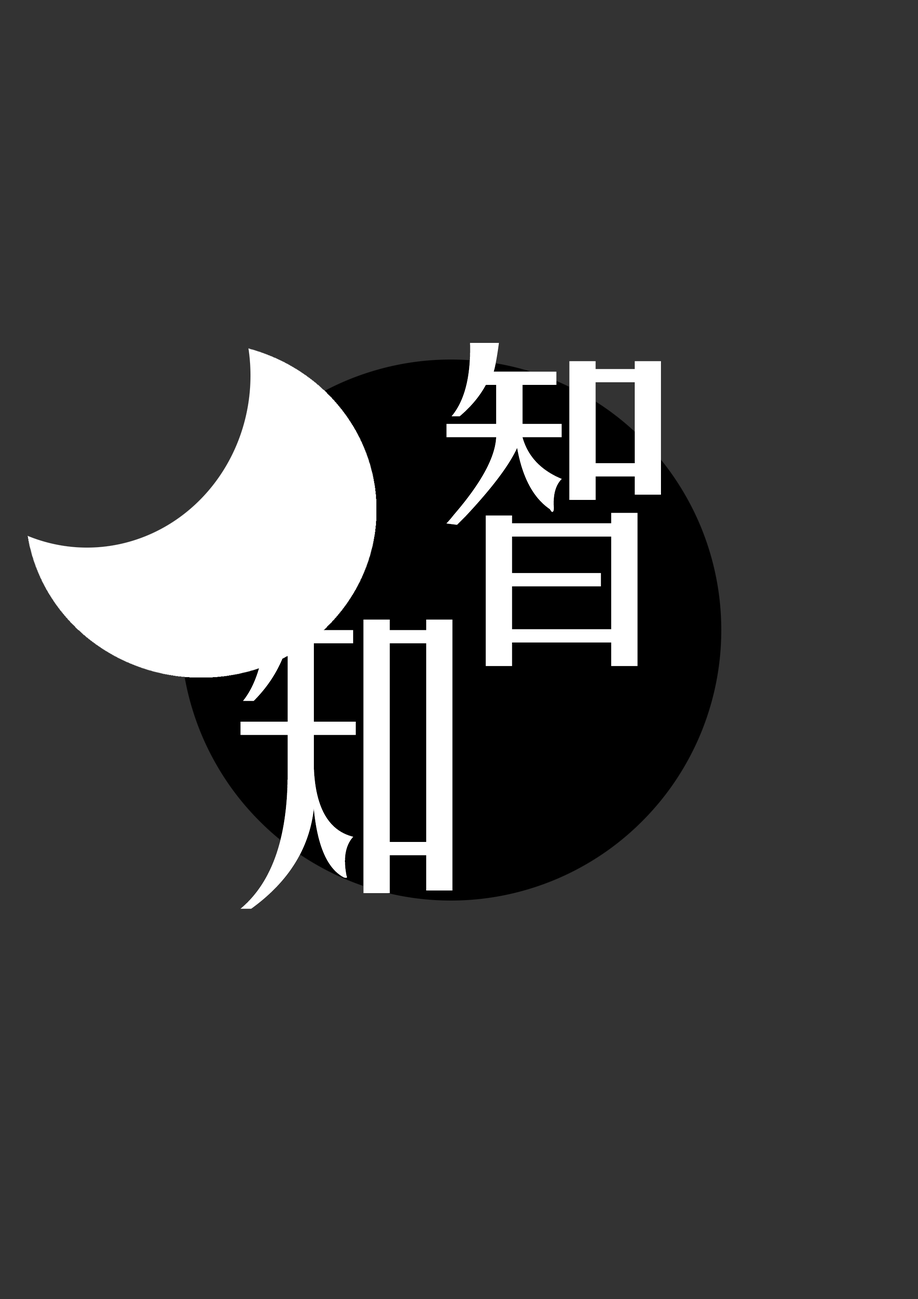
<style>
.page{position:relative;width:918px;height:1299px;background:#333333}
.page>*{position:absolute;margin:0}
.t1{font:334.7px "FZYTK--GBK1-0";color:#ffffff}
</style>
<div class="page">
<p class="t1" style="left:446px;top:343px;width:215px;height:323px">智</p>
<p class="t1" style="left:240px;top:585px;width:213px;height:324px">知</p>
</div>
